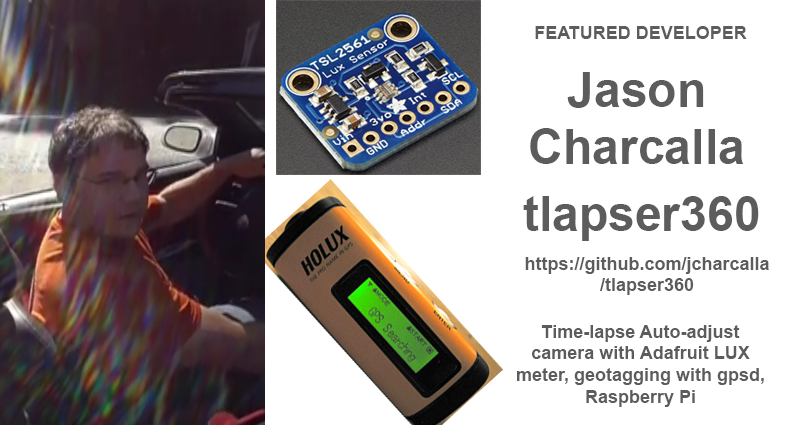
<style>
.page{position:relative;width:800px;height:425px;background:#ffffff}
.page>*{position:absolute;margin:0}
.t1{font:18px "Arial-BoldMT";color:#5c5c5c}
.t2{font:48px "Arial-BoldMT";color:#5c5c5c}
</style>
<div class="page">
<p class="t1" style="left:535px;top:26px;width:212px;height:13px">FEATURED DEVELOPER</p>
<p class="t2" style="left:530px;top:72px;width:214px;height:92px;text-align:center">Jason Charcalla</p>
<p class="t2" style="left:523px;top:196px;width:236px;height:45px">tlapser360</p>
<p class="t1" style="left:525px;top:257px;width:244px;height:38px;text-align:center">https://github.com/jcharcalla/tlapser360</p>
<p class="t1" style="left:517px;top:325px;width:247px;height:82px;text-align:center">Time-lapse Auto-adjust camera with Adafruit LUX meter, geotagging with gpsd, Raspberry Pi</p>
</div>
